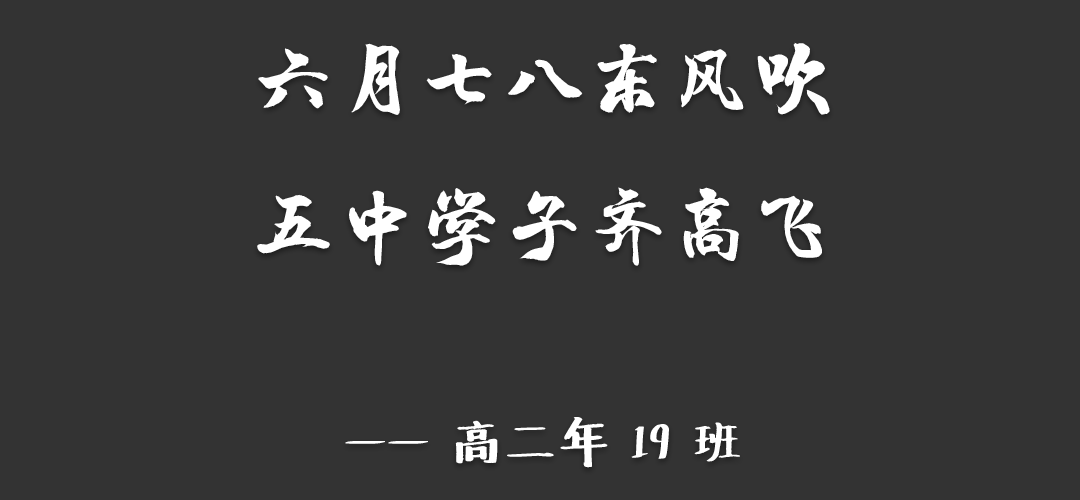
<style>
.page{position:relative;width:1080px;height:500px;background:#333333}
.page>*{position:absolute;margin:0}
.t1{font:83.3px "HYChengXingJ";color:#ffffff}
.t2{font:50px "Undefined";color:#ffffff}
</style>
<div class="page">
<p class="t1" style="left:257px;top:42px;width:573px;height:426px;text-align:center">六月七八东风吹<br>五中学子齐高飞<br><span class="t2"><br>—— 高二年 19 班</span></p>
</div>
